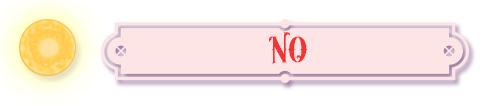
<style>
.page{position:relative;width:484px;height:106px;background:#ffffff}
.page>*{position:absolute;margin:0}
.t1{font:41.7px "Moyers";color:#f23434}
</style>
<div class="page">
<p class="t1" style="left:269px;top:31px;width:39px;height:33px">NO</p>
</div>
